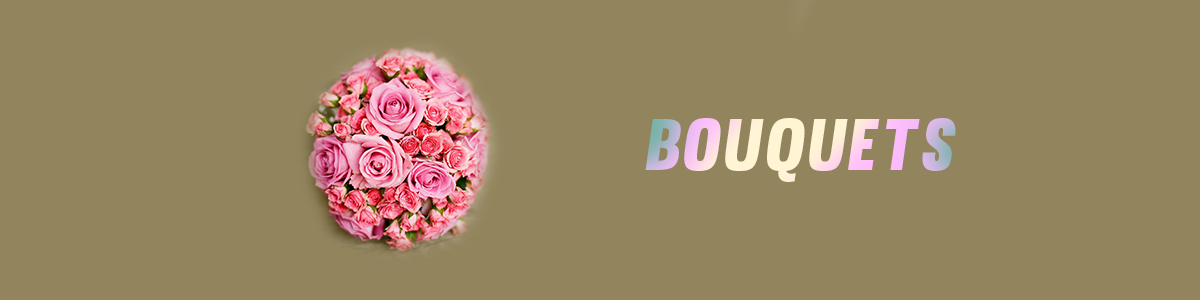
<style>
.page{position:relative;width:1200px;height:300px;background:#92855d}
.page>*{position:absolute;margin:0}
.t1{font:72px "Muro-Slant";letter-spacing:0.05em;color:#ffbbff}
</style>
<div class="page">
<p class="t1" style="left:645px;top:118px;width:311px;height:64px">bouquets</p>
</div>
